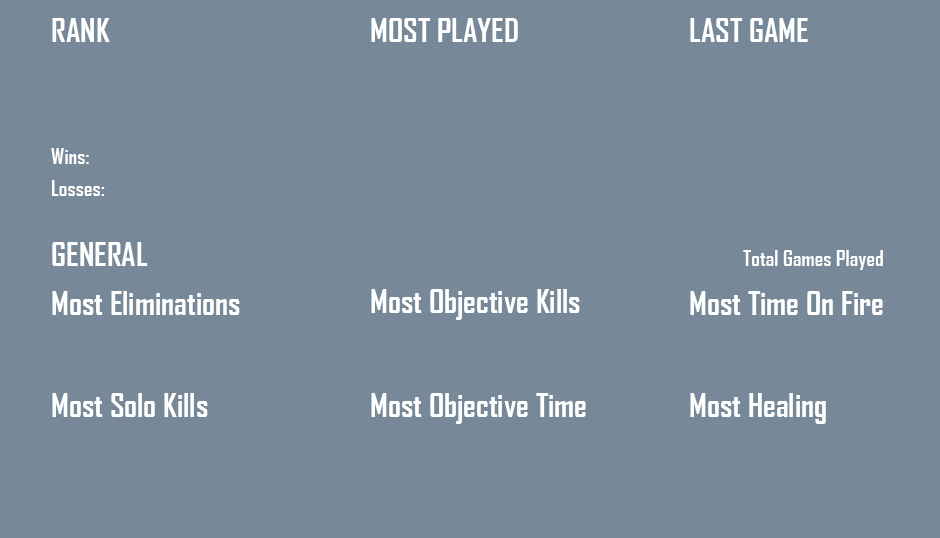
<style>
.page{position:relative;width:940px;height:538px;background:#778898}
.page>*{position:absolute;margin:0}
.t1{font:32px "AgencyFB-Bold";color:#feffff}
.t2{font:21.3px "AgencyFB-Bold";color:#feffff}
</style>
<div class="page">
<p class="t1" style="left:52px;top:18px;width:58px;height:24px">RANK</p>
<p class="t1" style="left:371px;top:18px;width:147px;height:24px">MOST PLAYED</p>
<p class="t1" style="left:690px;top:18px;width:118px;height:24px">LAST GAME</p>
<p class="t2" style="left:51px;top:148px;width:38px;height:16px">Wins:</p>
<p class="t2" style="left:52px;top:180px;width:53px;height:16px">Losses:</p>
<p class="t1" style="left:52px;top:242px;width:96px;height:24px">GENERAL</p>
<p class="t2" style="left:743px;top:250px;width:140px;height:20px">Total Games Played</p>
<p class="t1" style="left:52px;top:291px;width:188px;height:24px">Most Eliminations</p>
<p class="t1" style="left:371px;top:289px;width:209px;height:31px">Most Objective Kills</p>
<p class="t1" style="left:690px;top:291px;width:193px;height:24px">Most Time On Fire</p>
<p class="t1" style="left:52px;top:393px;width:156px;height:24px">Most Solo Kills</p>
<p class="t1" style="left:371px;top:393px;width:215px;height:31px">Most Objective Time</p>
<p class="t1" style="left:690px;top:393px;width:136px;height:31px">Most Healing</p>
</div>
